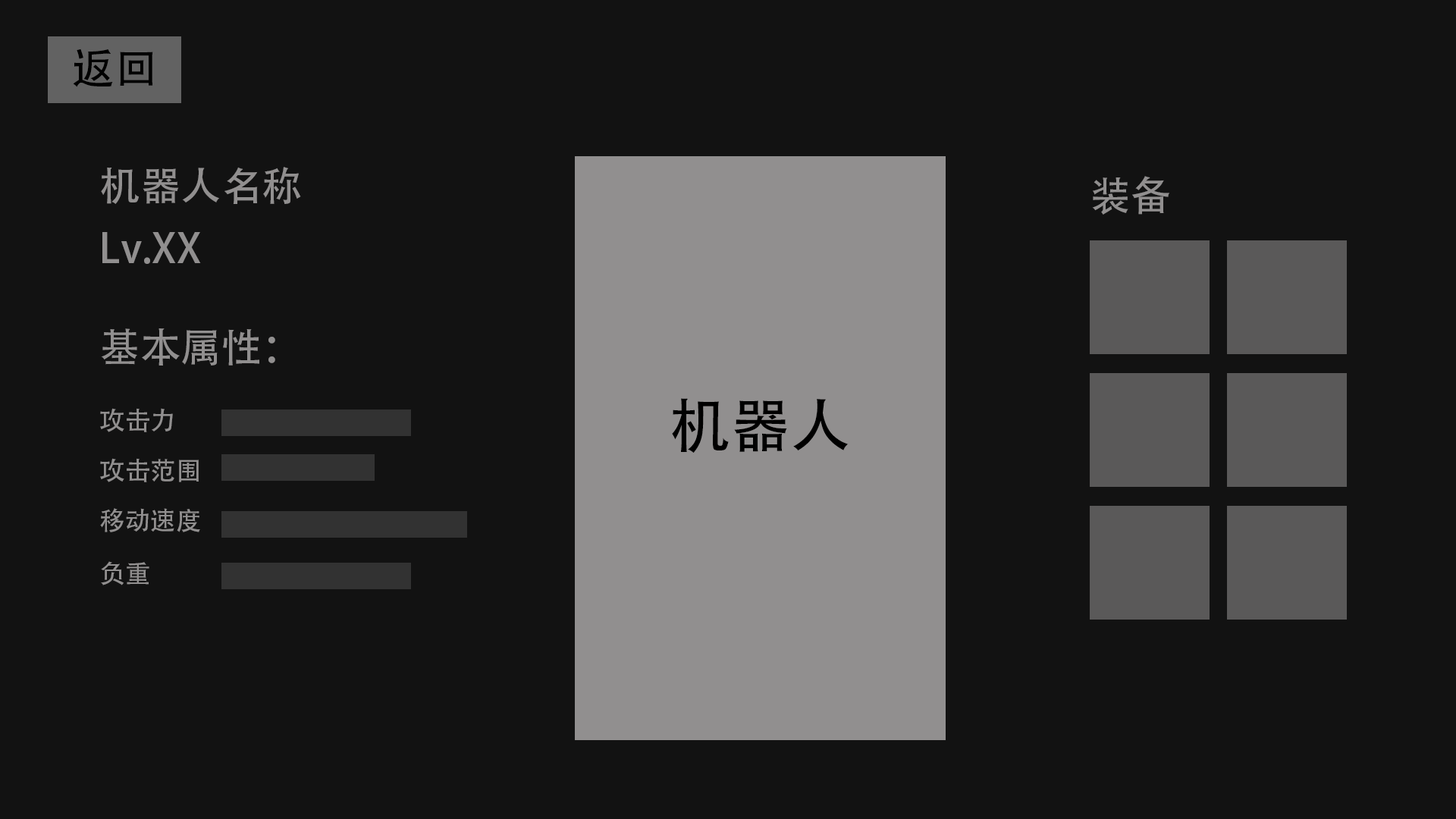
<style>
.page{position:relative;width:1456px;height:819px;background:#121212}
.page>*{position:absolute;margin:0}
.t1{font:43px "AdobeHeitiStd-Regular";color:#000000}
.t2{font:40.5px "AdobeHeitiStd-Regular";color:#918f8f}
.t3{font:60.3px "AdobeHeitiStd-Regular";color:#000000}
.t4{font:25.4px "AdobeHeitiStd-Regular";color:#918f8f}
</style>
<div class="page">
<p class="t1" style="left:73px;top:49px;width:80px;height:38px">返回</p>
<p class="t2" style="left:101px;top:167px;width:200px;height:37px">机器人名称</p>
<p class="t2" style="left:1092px;top:176px;width:77px;height:39px">装备</p>
<p class="t2" style="left:102px;top:232px;width:99px;height:32px">Lv.XX</p>
<p class="t2" style="left:101px;top:328px;width:174px;height:38px">基本属性：</p>
<p class="t3" style="left:672px;top:398px;width:177px;height:55px">机器人</p>
<p class="t4" style="left:100px;top:408px;width:73px;height:24px">攻击力</p>
<p class="t4" style="left:100px;top:458px;width:99px;height:24px">攻击范围</p>
<p class="t4" style="left:100px;top:508px;width:100px;height:24px">移动速度</p>
<p class="t4" style="left:101px;top:561px;width:48px;height:24px">负重</p>
</div>
